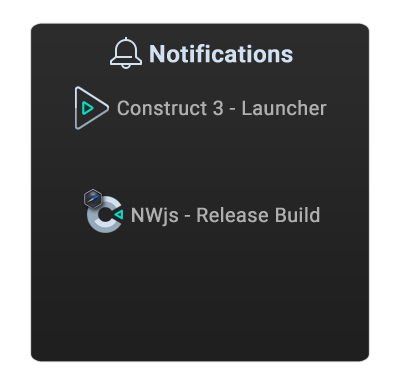
<style>
.page{position:relative;width:400px;height:385px;background:#ffffff}
.page>*{position:absolute;margin:0}
.t1{font:23.7px "Roboto-Medium";color:#d2e1f0;font-weight:bold}
.t2{font:19.7px "Roboto-Regular";color:#afafaf;font-weight:bold}
</style>
<div class="page">
<p class="t1" style="left:150px;top:44px;width:143px;height:19px">Notifications</p>
<p class="t2" style="left:117px;top:100px;width:210px;height:16px">Construct 3 - Launcher</p>
<p class="t2" style="left:132px;top:207px;width:188px;height:20px">NWjs - Release Build</p>
</div>
